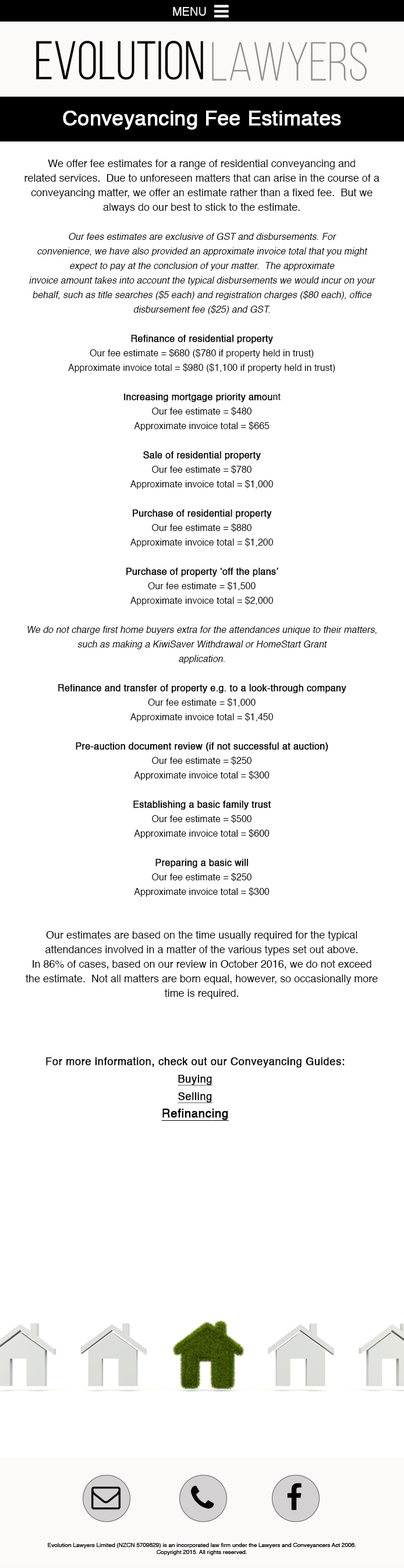
<style>
.page{position:relative;width:404px;height:1568px;background:#ffffff}
.page>*{position:absolute;margin:0}
.t1{font:11.6px "Helvetica";color:#fdfcfc}
.t2{font:20.4px "Helvetica";color:#fdfcfc;font-weight:bold}
.t3{font:9.3px/14.6px "Helvetica";color:#040404;font-style:italic}
.t4{font:10.5px/14.6px "Helvetica";color:#040404}
.t5{font:9.3px/14.6px "Helvetica";color:#040404;font-weight:bold}
.t6{font:9.3px/14.6px "Helvetica";color:#040404}
.t7{font:10.5px/17.5px "Helvetica";letter-spacing:0.016em;color:#040404;font-weight:bold}
.t8{font:10.5px/17.5px "Helvetica";letter-spacing:0.016em;color:#040404;font-weight:bold;text-decoration:underline}
.t9{font:11.6px/17.5px "Helvetica";letter-spacing:0.016em;color:#040404;font-weight:bold;text-decoration:underline}
.t10{font:11.6px/14.6px "Helvetica";letter-spacing:0.016em;color:#040404;font-weight:bold;text-decoration:underline}
</style>
<div class="page">
<p class="t1" style="left:173px;top:7px;width:33px;height:9px">MENU</p>
<p class="t2" style="left:63px;top:111px;width:278px;height:19px">Conveyancing Fee Estimates</p>
<p class="t3" style="left:24px;top:160px;width:356px;height:839px;text-align:center"><span class="t4">We offer fee estimates for a range of residential conveyancing and <br>related services.  Due to unforeseen matters that can arise in the course of a conveyancing matter, we offer an estimate rather than a fixed fee.  But we always do our best to stick to the estimate. <br><br></span>Our fees estimates are exclusive of GST and disbursements. For <br>convenience, we have also provided an approximate invoice total that you might expect to pay at the conclusion of your matter.  The approximate <br>invoice amount takes into account the typical disbursements we would incur on your behalf, such as title searches ($5 each) and registration charges ($80 each), office disbursement fee ($25) and GST.  <br><br><span class="t5">Refinance of residential property<br></span><span class="t6">Our fee estimate = $680 ($780 if property held in trust)<br>Approximate invoice total = $980 ($1,100 if property held in trust)<br><br></span><span class="t5">Increasing mortgage priority amou</span><span class="t6">nt<br>Our fee estimate = $480<br>Approximate invoice total = $665<br><br></span><span class="t5">Sale of residential property<br></span><span class="t6">Our fee estimate = $780<br>Approximate invoice total = $1,000<br><br></span><span class="t5">Purchase of residential property<br></span><span class="t6">Our fee estimate = $880<br>Approximate invoice total = $1,200<br><br></span><span class="t5">Purchase of property ‘off the plans’<br></span><span class="t6">Our fee estimate = $1,500<br>Approximate invoice total = $2,000<br><br></span>We do not charge first home buyers extra for the attendances unique to their matters, such as making a KiwiSaver Withdrawal or HomeStart Grant <br>application.<br><br><span class="t5">Refinance and transfer of property e.g. to a look-through company<br></span><span class="t6">Our fee estimate = $1,000<br>Approximate invoice total = $1,450<br><br></span><span class="t5">Pre-auction document review (if not successful at auction)<br></span><span class="t6">Our fee estimate = $250<br>Approximate invoice total = $300<br><br></span><span class="t5">Establishing a basic family trust<br></span><span class="t6">Our fee estimate = $500<br>Approximate invoice total = $600<br><br></span><span class="t5">Preparing a basic will<br></span><span class="t6">Our fee estimate = $250<br>Approximate invoice total = $300<br><br><br></span><span class="t4">Our estimates are based on the time usually required for the typical <br>attendances involved in a matter of the various types set out above.  <br>In 86% of cases, based on our review in October 2016, we do not exceed the estimate.  Not all matters are born equal, however, so occasionally more time is required.</span></p>
<p class="t7" style="left:46px;top:1057px;width:299px;height:64px;text-align:center">For more information, check out our Conveyancing Guides:<br><span class="t8">Buying<br>Selling<br></span><span class="t9">Refinanc</span><span class="t10">ing</span></p>
</div>
